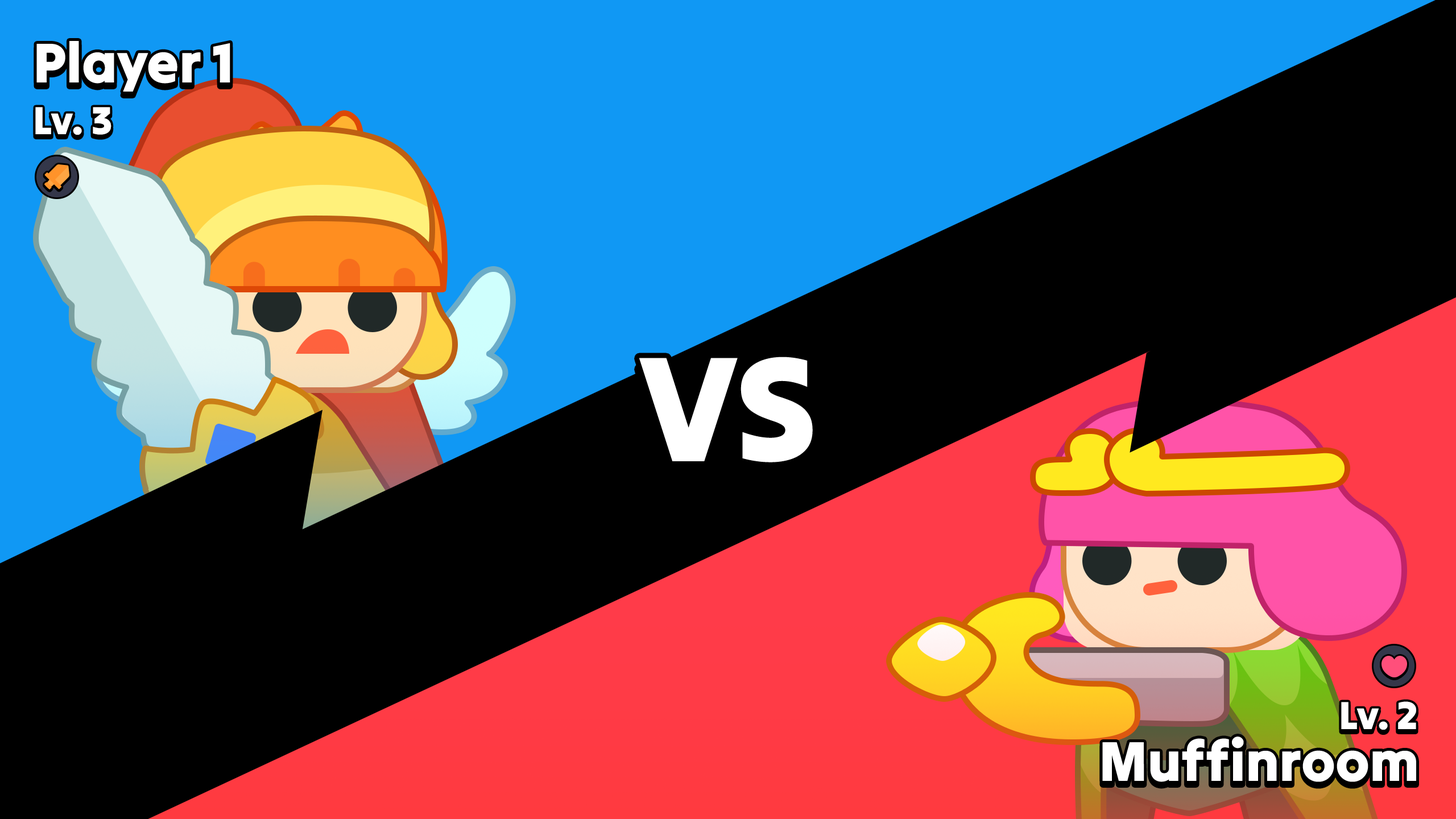
<style>
.page{position:relative;width:1456px;height:819px;background:#000000}
.page>*{position:absolute;margin:0}
.t1{font:56.9px "TiltWarp-Regular";letter-spacing:-0.01em;color:#ffffff}
.t2{font:39.8px "TiltWarp-Regular";letter-spacing:-0.01em;color:#ffffff}
.t3{font:151.7px "TiltWarp-Regular";color:#ffffff;text-transform:uppercase;font-style:italic}
</style>
<div class="page">
<p class="t1" style="left:36px;top:41px;width:194px;height:51px">Player 1</p>
<p class="t2" style="left:35px;top:107px;width:76px;height:28px">Lv. 3</p>
<p class="t3" style="left:639px;top:357px;width:174px;height:105px">VS</p>
<p class="t2" style="left:1341px;top:701px;width:75px;height:29px">Lv. 2</p>
<p class="t1" style="left:1102px;top:737px;width:314px;height:45px">Muffinroom</p>
</div>
